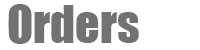
<style>
.page{position:relative;width:200px;height:50px;background:#ffffff}
.page>*{position:absolute;margin:0}
.t1{font:48px "Impact";color:#727272}
</style>
<div class="page">
<p class="t1" style="left:8px;top:4px;width:131px;height:40px">Orders</p>
</div>
